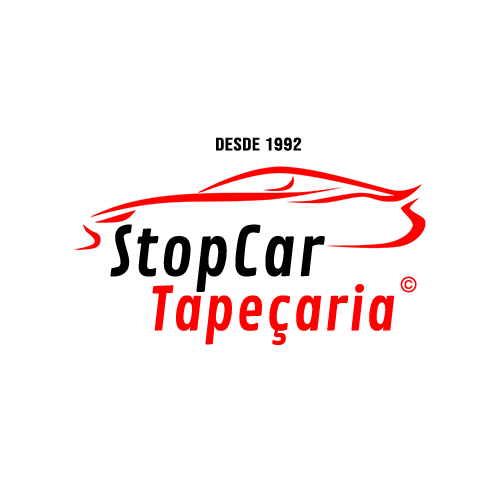
<style>
.page{position:relative;width:500px;height:500px;background:#ffffff}
.page>*{position:absolute;margin:0}
.t1{font:17.8px "BebasNeue-Regular";letter-spacing:0.025em;color:#000000;scale:1.25 1}
.t2{font:67px "ContrailOne-Regular";letter-spacing:0.025em;color:#000000}
.t3{font:21.2px "ArialMT";letter-spacing:0.025em;color:#ff0000}
.t4{font:58.7px "ContrailOne-Regular";letter-spacing:0.025em;color:#ff0000}
</style>
<div class="page">
<p class="t1" style="left:216px;top:137px;width:86px;height:14px">desde 1992</p>
<p class="t2" style="left:110px;top:224px;width:215px;height:68px">StopCar</p>
<p class="t3" style="left:400px;top:276px;width:17px;height:17px">©</p>
<p class="t4" style="left:152px;top:284px;width:243px;height:61px">Tapeçaria</p>
</div>
